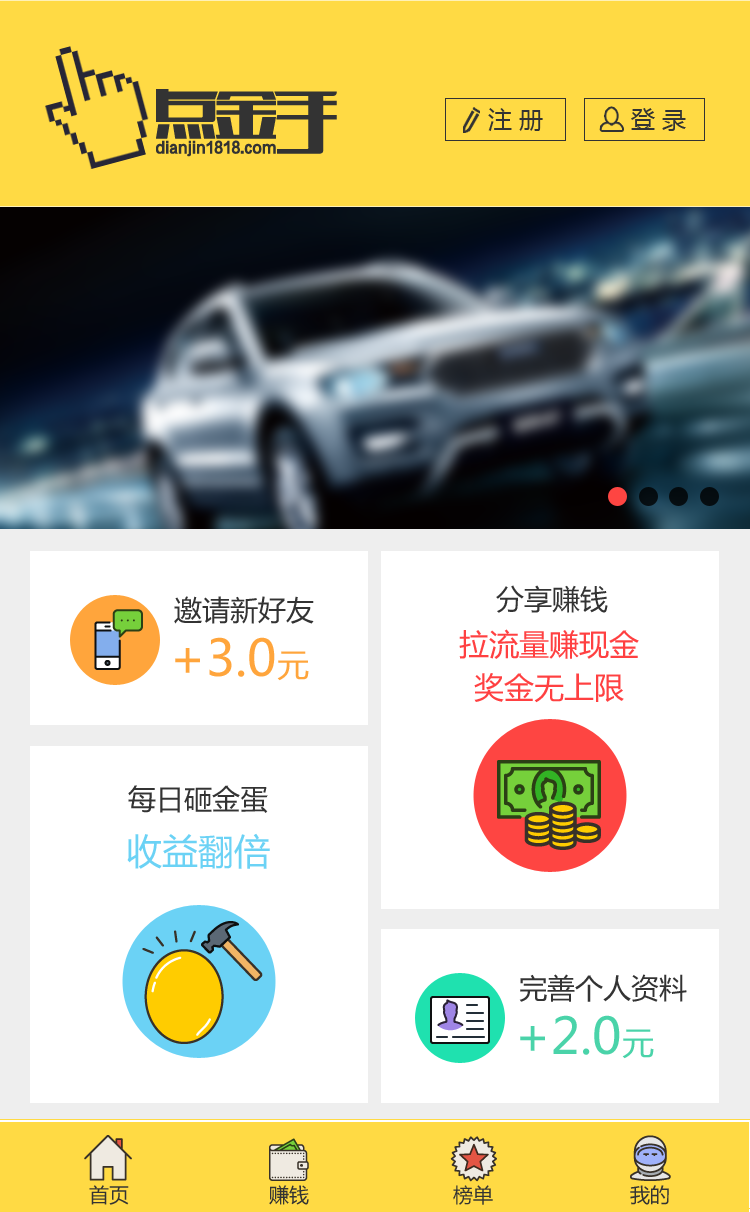
<style>
.page{position:relative;width:750px;height:1212px;background:#ffffff}
.page>*{position:absolute;margin:0}
.t1{font:24px "MicrosoftYaHei";color:#333333}
.t2{font:28px "MicrosoftYaHei";color:#333333}
.t3{font:30px/43px "MicrosoftYaHei";color:#ff4041}
.t4{font:50px "MicrosoftYaHei";color:#ffa53c}
.t5{font:32px "MicrosoftYaHei";color:#ffa53c}
.t6{font:36px "MicrosoftYaHei";color:#6bd2f5}
.t7{font:50px "MicrosoftYaHei";color:#4ad3a9}
.t8{font:32px "MicrosoftYaHei";color:#4ad3a9}
.t9{font:20px "MicrosoftYaHei";color:#333333}
</style>
<div class="page">
<p class="t1" style="left:488px;top:108px;width:55px;height:23px">注 册</p>
<p class="t1" style="left:631px;top:108px;width:55px;height:23px">登 录</p>
<p class="t2" style="left:496px;top:585px;width:112px;height:28px">分享赚钱</p>
<p class="t2" style="left:174px;top:596px;width:140px;height:28px">邀请新好友</p>
<p class="t3" style="left:459px;top:629px;width:180px;height:74px;text-align:center">拉流量赚现金<br>奖金无上限</p>
<p class="t4" style="left:175px;top:637px;width:134px;height:44px">+3.0<span class="t5">元</span></p>
<p class="t2" style="left:128px;top:785px;width:140px;height:28px">每日砸金蛋</p>
<p class="t6" style="left:127px;top:833px;width:143px;height:36px">收益翻倍</p>
<p class="t2" style="left:519px;top:974px;width:168px;height:28px">完善个人资料</p>
<p class="t7" style="left:520px;top:1015px;width:134px;height:44px">+2.0<span class="t8">元</span></p>
<p class="t9" style="left:89px;top:1185px;width:40px;height:20px">首页</p>
<p class="t9" style="left:269px;top:1185px;width:40px;height:20px">赚钱</p>
<p class="t9" style="left:453px;top:1185px;width:40px;height:20px">榜单</p>
<p class="t9" style="left:630px;top:1185px;width:39px;height:20px">我的</p>
</div>
